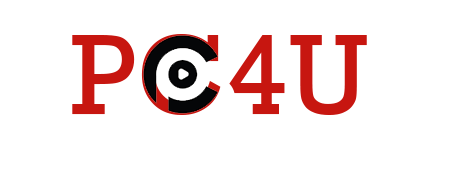
<style>
.page{position:relative;width:450px;height:180px;background:#ffffff}
.page>*{position:absolute;margin:0}
.t1{font:116.7px "Rockwell";color:#c71610}
</style>
<div class="page">
<p class="t1" style="left:72px;top:34px;width:295px;height:81px">PC4U</p>
</div>
